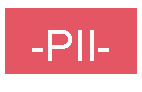
<style>
.page{position:relative;width:142px;height:92px;background:#e45664}
.page>*{position:absolute;margin:0}
.t1{font:42.5px "ArialMT";color:#fbfbfb}
</style>
<div class="page">
<p class="t1" style="left:32px;top:30px;width:77px;height:31px">-PII-</p>
</div>
